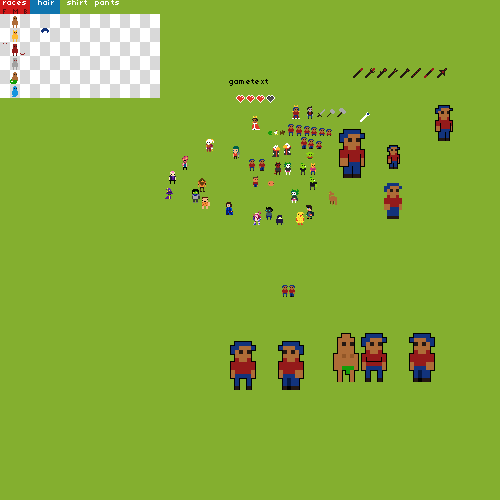
<style>
.page{position:relative;width:500px;height:500px;background:#84af2f}
.page>*{position:absolute;margin:0}
.t1{font:8px "04b03";letter-spacing:0.04em;color:#ffffff}
.t2{font:8px "04b03";letter-spacing:0.04em;color:#000000}
</style>
<div class="page">
<p class="t1" style="left:3px;top:1px;width:23px;height:4px">races</p>
<p class="t1" style="left:38px;top:0px;width:16px;height:5px">hair</p>
<p class="t1" style="left:67px;top:0px;width:20px;height:5px">shirt</p>
<p class="t1" style="left:95px;top:0px;width:24px;height:7px">pants</p>
<p class="t2" style="left:229px;top:79px;width:39px;height:7px">gametext</p>
</div>
